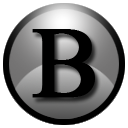
<style>
.page{position:relative;width:128px;height:128px;background:#ffffff}
.page>*{position:absolute;margin:0}
.t1{font:100px "TimesNewRomanPSMT";color:#000000;font-weight:bold}
</style>
<div class="page">
<p class="t1" style="left:32px;top:29px;width:63px;height:69px">B</p>
</div>
